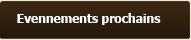
<style>
.page{position:relative;width:191px;height:40px}
.page>*{position:absolute;margin:0}
.t1{font:12px "Tahoma-Bold";color:#ffffff}
</style>
<div class="page">
<p class="t1" style="left:17px;top:13px;width:144px;height:12px">Evennements prochains</p>
</div>
